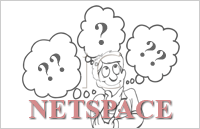
<style>
.page{position:relative;width:200px;height:129px;background:#ffffff}
.page>*{position:absolute;margin:0}
.t1{font:32.3px "TimesNewRomanPS-BoldMT";color:#666666}
.t2{font:26.9px "TimesNewRomanPS-BoldMT";color:#666666}
.t3{font:28.9px "TimesNewRomanPS-BoldMT";color:#666666}
.t4{font:27.5px "TimesNewRomanPS-BoldMT";color:#d58b8c}
</style>
<div class="page">
<p class="t1" style="left:95px;top:22px;width:13px;height:23px;rotate:-3deg">?</p>
<p class="t2" style="left:140px;top:41px;width:26px;height:25px;rotate:41deg">??</p>
<p class="t3" style="left:38px;top:53px;width:27px;height:28px;rotate:-34deg">??</p>
<p class="t4" style="left:28px;top:100px;width:144px;height:18px">NETSPACE</p>
</div>
